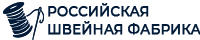
<style>
.page{position:relative;width:200px;height:40px;background:#ffffff}
.page>*{position:absolute;margin:0}
.t1{font:15.1px/18.5px "Montserrat-Medium";color:#011a38;text-transform:uppercase;font-weight:bold;scale:0.88 1}
</style>
<div class="page">
<p class="t1" style="left:48px;top:3px;width:153px;height:32px">Российская<br>Швейная фабрика</p>
</div>
